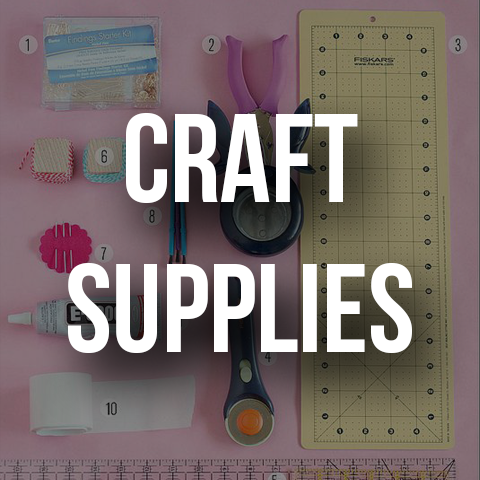
<style>
.page{position:relative;width:480px;height:480px}
.page>*{position:absolute;margin:0}
.t1{font:125px "BebasNeue";color:#ffffff}
</style>
<div class="page">
<p class="t1" style="left:68px;top:113px;width:344px;height:240px;text-align:center">craft<br>supplies</p>
</div>
